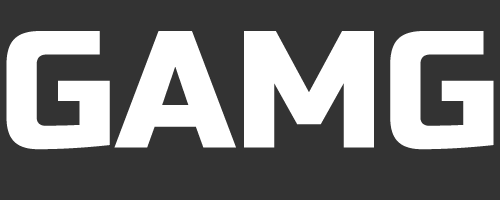
<style>
.page{position:relative;width:500px;height:200px;background:#333333}
.page>*{position:absolute;margin:0}
.t1{font:166.1px "RussoOne-Regular";color:#ffffff}
</style>
<div class="page">
<p class="t1" style="left:6px;top:31px;width:488px;height:119px">GAMG</p>
</div>
